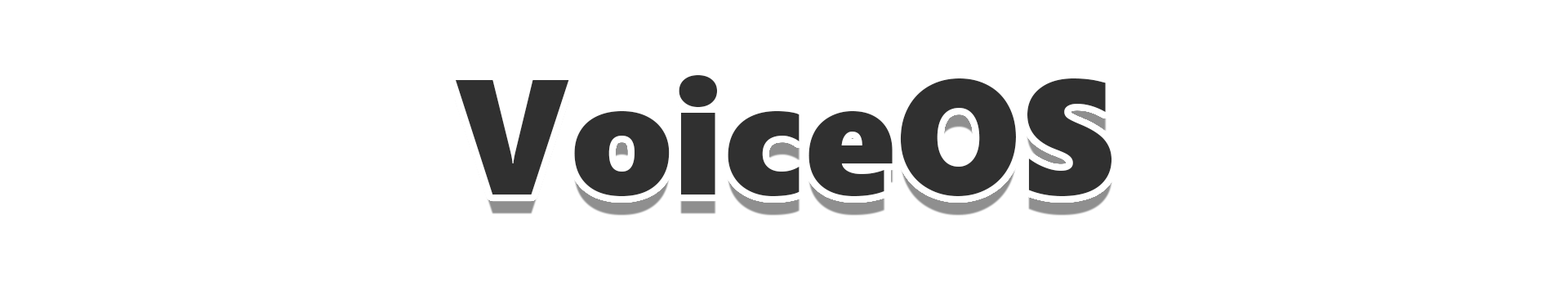
<style>
.page{position:relative;width:1568px;height:286px;background:#ffffff}
.page>*{position:absolute;margin:0}
.t1{font:163.3px "SegoeUIBlack";color:#303030}
</style>
<div class="page">
<p class="t1" style="left:455px;top:75px;width:657px;height:121px">VoiceOS</p>
</div>
